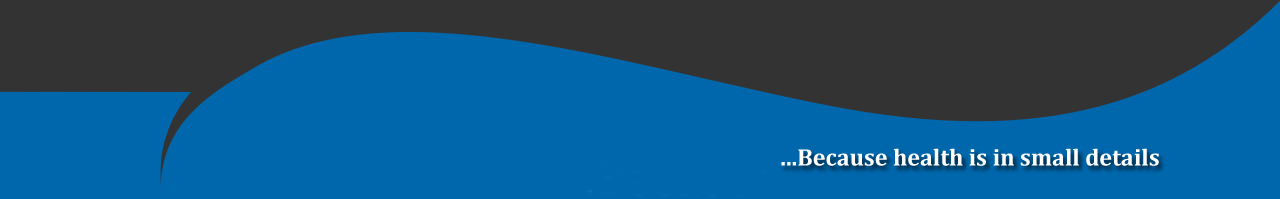
<style>
.page{position:relative;width:1280px;height:199px;background:#0067ac}
.page>*{position:absolute;margin:0}
.t1{font:24px "Cambria-Bold";color:#ffffff}
</style>
<div class="page">
<p class="t1" style="left:781px;top:148px;width:378px;height:18px">...Because health is in small details</p>
</div>
